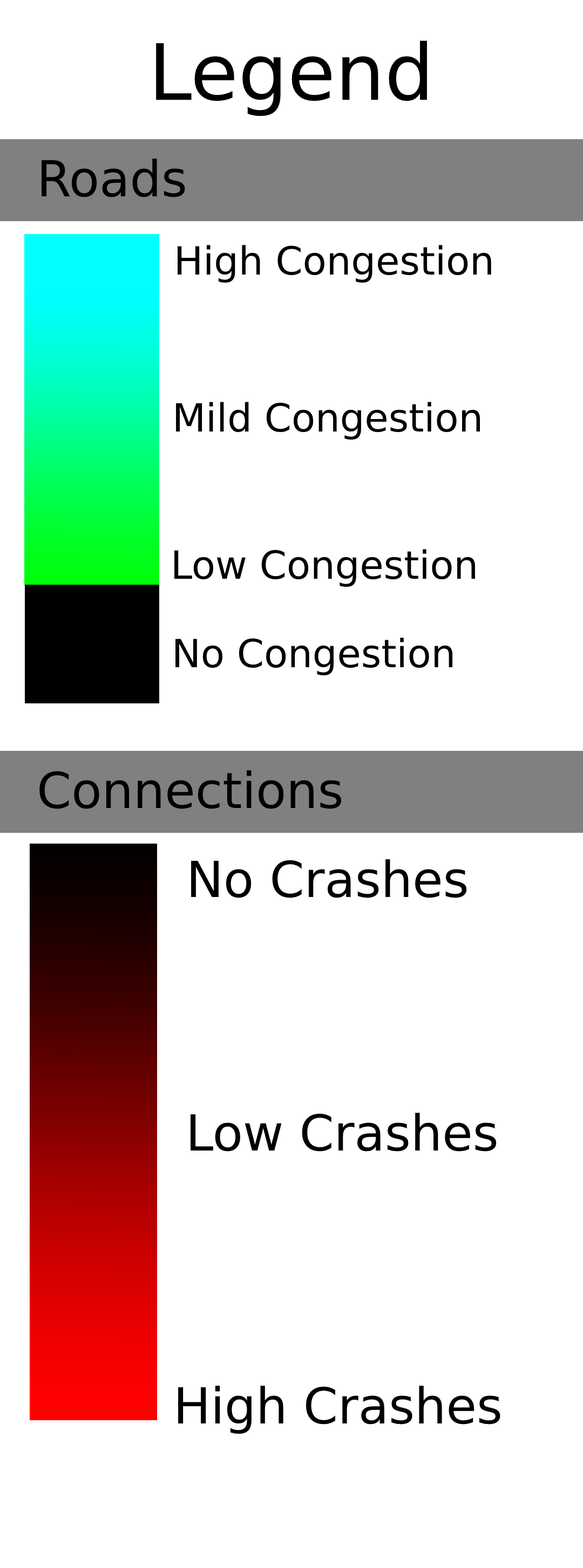
<style>
.page{position:relative;width:583px;height:1568px;background:#ffffff}
.page>*{position:absolute;margin:0}
.t1{font:77.7px "DejaVuSans";color:#000000}
.t2{font:49.6px "DejaVuSans";color:#000000}
.t3{font:38.8px "DejaVuSans";color:#000000}
</style>
<div class="page">
<p class="t1" style="left:156px;top:40px;width:271px;height:76px">Legend</p>
<p class="t2" style="left:42px;top:159px;width:143px;height:38px">Roads</p>
<p class="t3" style="left:177px;top:245px;width:314px;height:38px">High Congestion</p>
<p class="t3" style="left:176px;top:402px;width:304px;height:38px">Mild Congestion</p>
<p class="t3" style="left:174px;top:549px;width:301px;height:38px">Low Congestion</p>
<p class="t3" style="left:175px;top:638px;width:278px;height:37px">No Congestion</p>
<p class="t2" style="left:39px;top:770px;width:302px;height:39px">Connections</p>
<p class="t2" style="left:191px;top:859px;width:276px;height:39px">No Crashes</p>
<p class="t2" style="left:190px;top:1113px;width:306px;height:39px">Low Crashes</p>
<p class="t2" style="left:178px;top:1386px;width:322px;height:48px">High Crashes</p>
</div>
